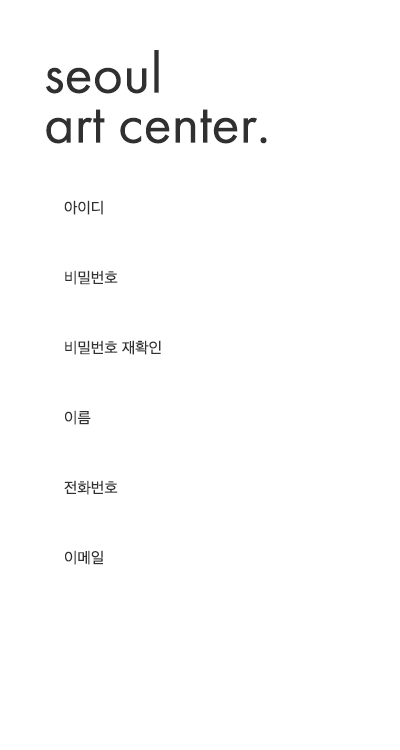
<style>
.page{position:relative;width:400px;height:750px;background:#ffffff}
.page>*{position:absolute;margin:0}
.t1{font:58.3px/50px "FuturaPT-Book";color:#303030}
.t2{font:14.6px "SDGothicNeoa-dRg";color:#303030}
</style>
<div class="page">
<p class="t1" style="left:46px;top:50px;width:221px;height:94px">seoul<br>art center.</p>
<p class="t2" style="left:64px;top:200px;width:39px;height:15px">아이디</p>
<p class="t2" style="left:65px;top:270px;width:53px;height:15px">비밀번호</p>
<p class="t2" style="left:65px;top:340px;width:96px;height:15px">비밀번호 재확인</p>
<p class="t2" style="left:65px;top:410px;width:26px;height:15px">이름</p>
<p class="t2" style="left:64px;top:480px;width:54px;height:15px">전화번호</p>
<p class="t2" style="left:65px;top:550px;width:38px;height:15px">이메일</p>
</div>
